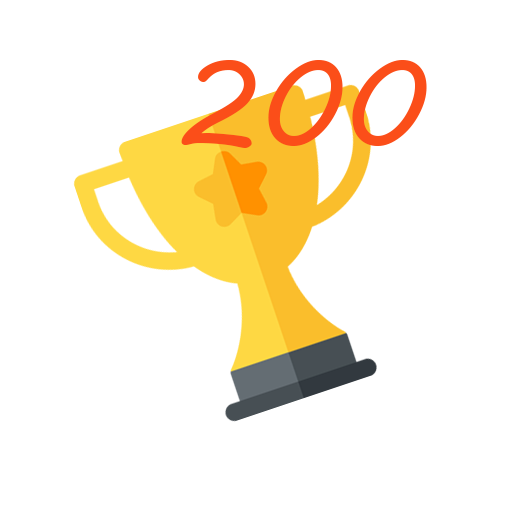
<style>
.page{position:relative;width:512px;height:512px;background:#ffffff}
.page>*{position:absolute;margin:0}
.t1{font:120px "MVBoli";color:#fb4e19}
</style>
<div class="page">
<p class="t1" style="left:181px;top:60px;width:246px;height:88px">200</p>
</div>
